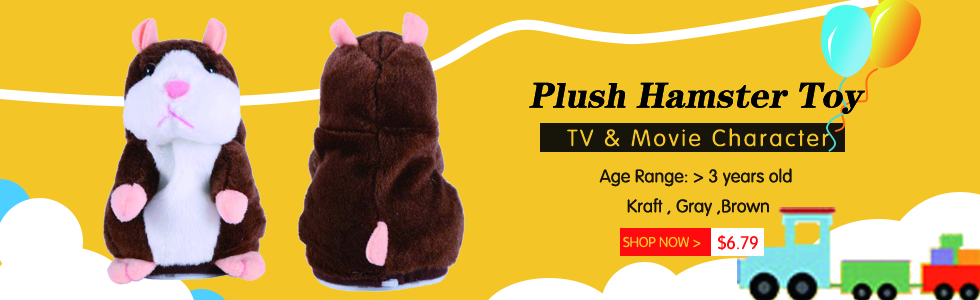
<style>
.page{position:relative;width:980px;height:300px;background:#f4c527}
.page>*{position:absolute;margin:0}
.t1{font:36px "FZCHYJW--GB1-0";color:#010203;font-style:italic}
.t2{font:23.6px "FZY3JW--GB1-0";letter-spacing:0.1em;color:#f4c527}
.t3{font:18px/30px "FZY3JW--GB1-0";color:#171409}
.t4{font:14px "FZY3JW--GB1-0";color:#f4c527}
.t5{font:18px "FZY3JW--GB1-0";color:#ff0a0e}
.t6{font:24px "FZY3JW--GB1-0";color:#ff0a0e}
</style>
<div class="page">
<p class="t1" style="left:529px;top:82px;width:336px;height:32px">Plush Hamster Toy</p>
<p class="t2" style="left:567px;top:128px;width:263px;height:19px">TV &amp; Movie Character</p>
<p class="t3" style="left:599px;top:168px;width:193px;height:49px;text-align:center">Age Range: &gt; 3 years old<br> Kraft , Gray ,Brown</p>
<p class="t4" style="left:623px;top:236px;width:78px;height:12px">SHOP NOW &gt;</p>
<p class="t5" style="left:718px;top:234px;width:40px;height:17px"><span class="t6"> </span>$6.79</p>
</div>
